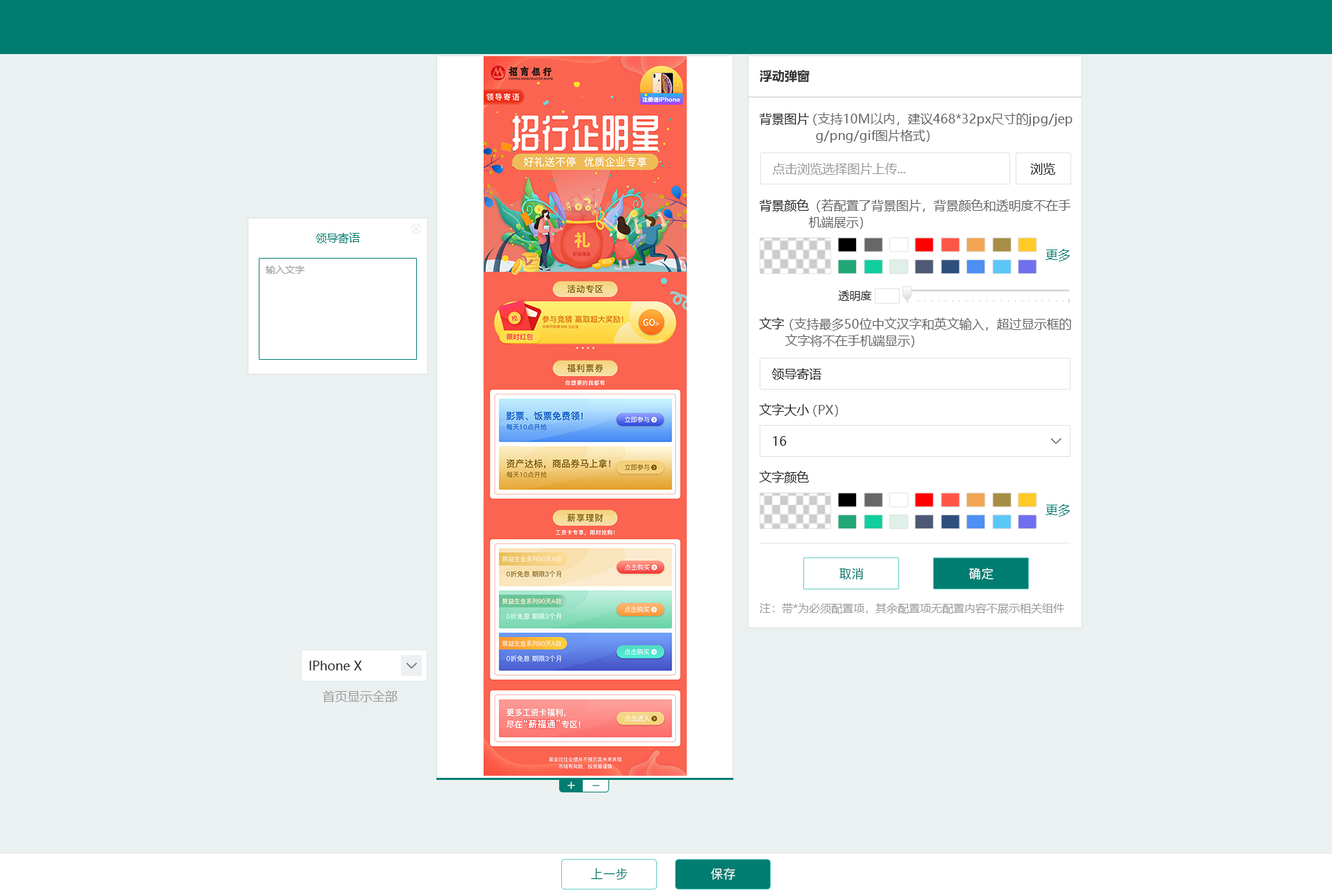
<style>
.page{position:relative;width:1332px;height:895px;background:#ebf1f1}
.page>*{position:absolute;margin:0}
.t1{font:12.5px "MicrosoftYaHei-Bold";color:#333333}
.t2{font:12.5px "MicrosoftYaHei";color:#222222}
.t3{font:12.5px/16.6px "MicrosoftYaHei";color:#666666}
.t4{font:12.5px "MicrosoftYaHei";color:#999999}
.t5{font:11.1px "MicrosoftYaHei";color:#007d71}
.t6{font:12.5px "MicrosoftYaHei";color:#007d71}
.t7{font:9.7px "MicrosoftYaHei";color:#999999}
.t8{font:11.1px "MicrosoftYaHei";color:#222222}
.t9{font:12.5px "MicrosoftYaHei";color:#666666}
.t10{font:12.5px "PingFang-SC-Medium";color:#007d71}
.t11{font:12.5px "PingFang-SC-Medium";color:#ffffff}
.t12{font:11.1px "MicrosoftYaHei";color:#999999}
.t13{font:13.9px "PingFang-SC-Medium";color:#ffffff}
.t14{font:13.9px "PingFang-SC-Medium"}
</style>
<div class="page">
<p class="t1" style="left:759px;top:70px;width:50px;height:13px">浮动弹窗</p>
<p class="t2" style="left:759px;top:113px;width:50px;height:12px">背景图片</p>
<p class="t3" style="left:813px;top:112px;width:259px;height:31px">（支持10M以内，建议468*32px尺寸的jpg/jep<br>   g/png/gif图片格式）</p>
<p class="t4" style="left:772px;top:163px;width:133px;height:12px">点击浏览选择图片上传...</p>
<p class="t2" style="left:1030px;top:163px;width:25px;height:12px">浏览</p>
<p class="t2" style="left:759px;top:199px;width:50px;height:13px">背景颜色</p>
<p class="t3" style="left:809px;top:199px;width:262px;height:30px">（若配置了背景图片，背景颜色和透明度不在手<br>机端展示）</p>
<p class="t5" style="left:316px;top:232px;width:44px;height:11px">领导寄语</p>
<p class="t6" style="left:1045px;top:249px;width:25px;height:12px">更多</p>
<p class="t7" style="left:266px;top:266px;width:38px;height:8px">输入文字</p>
<p class="t8" style="left:838px;top:291px;width:33px;height:10px">透明度</p>
<p class="t2" style="left:759px;top:318px;width:25px;height:11px">文字</p>
<p class="t3" style="left:785px;top:318px;width:286px;height:29px">（支持最多50位中文汉字和英文输入，超过显示框的<br> 文字将不在手机端显示）</p>
<p class="t2" style="left:771px;top:368px;width:50px;height:12px">领导寄语</p>
<p class="t2" style="left:759px;top:404px;width:50px;height:12px">文字大小</p>
<p class="t9" style="left:813px;top:405px;width:25px;height:12px">（PX）</p>
<p class="t2" style="left:773px;top:436px;width:14px;height:10px">16</p>
<p class="t2" style="left:759px;top:471px;width:50px;height:12px">文字颜色</p>
<p class="t6" style="left:1045px;top:504px;width:25px;height:13px">更多</p>
<p class="t10" style="left:839px;top:568px;width:24px;height:12px">取消</p>
<p class="t11" style="left:969px;top:568px;width:24px;height:12px">确定</p>
<p class="t12" style="left:759px;top:603px;width:305px;height:11px">注：带*为必须配置项，其余配置项无配置内容不展示相关组件</p>
<p class="t2" style="left:309px;top:661px;width:53px;height:10px">IPhone X</p>
<p class="t4" style="left:323px;top:691px;width:74px;height:12px">首页显示全部</p>
<p class="t13" style="left:567px;top:782px;width:8px;height:8px">+</p>
<p class="t14" style="left:592px;top:785px;width:8px;height:2px">_</p>
<p class="t10" style="left:591px;top:868px;width:37px;height:12px">上一步</p>
<p class="t11" style="left:710px;top:868px;width:25px;height:12px">保存</p>
</div>
